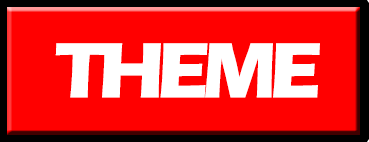
<style>
.page{position:relative;width:369px;height:142px;background:#ff0000}
.page>*{position:absolute;margin:0}
.t1{font:140px "ErasITC-Bold";letter-spacing:-0.1em;color:#ffffff}
.t2{font:48px "ErasITC-Bold";letter-spacing:-0.1em;color:#ffffff}
</style>
<div class="page">
<p class="t1" style="left:55px;top:43px;width:265px;height:55px"><span class="t2"><br><br><br><br><br><br><br><br><br><br><br><br><br></span><br><br><br><br>THEME</p>
</div>
